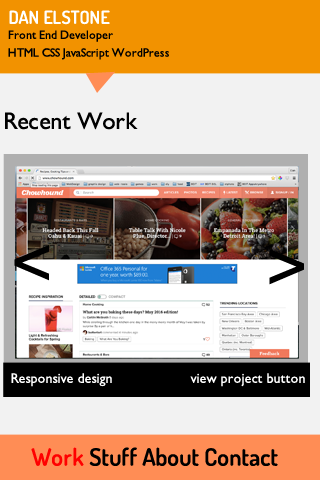
<style>
.page{position:relative;width:320px;height:480px;background:#f2f2f2}
.page>*{position:absolute;margin:0}
.t1{font:18px "Dosis-SemiBold";color:#ffffff}
.t2{font:12px "GillSans";color:#000000}
.t3{font:24px "GillSans";color:#000000}
.t4{font:72px "GillSans";color:#000000}
.t5{font:14px "GillSans";color:#ffffff}
.t6{font:24px "Dosis-SemiBold";color:#000000}
.t7{font:24px "Dosis-SemiBold";color:#ff0000}
</style>
<div class="page">
<p class="t1" style="left:9px;top:10px;width:101px;height:15px">DAN ELSTONE</p>
<p class="t2" style="left:8px;top:30px;width:105px;height:12px">Front End Developer</p>
<p class="t2" style="left:8px;top:48px;width:161px;height:12px">HTML CSS JavaScript WordPress</p>
<p class="t3" style="left:5px;top:112px;width:133px;height:18px">Recent Work</p>
<p class="t4" style="left:14px;top:245px;width:35px;height:36px">&lt;</p>
<p class="t4" style="left:269px;top:249px;width:35px;height:36px">&gt;</p>
<p class="t5" style="left:11px;top:373px;width:294px;height:14px">Responsive design   view project button</p>
<p class="t6" style="left:31px;top:447px;width:247px;height:19px"><span class="t7">Work</span> Stuff About Contact</p>
</div>
